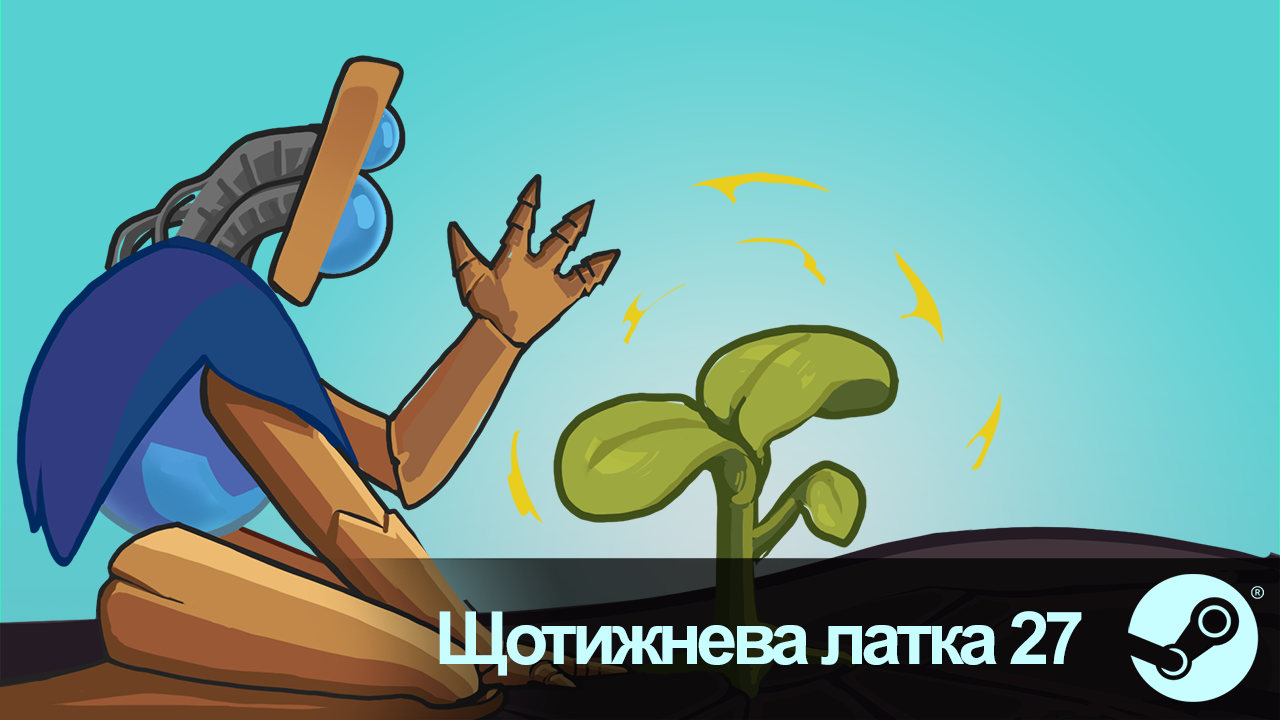
<style>
.page{position:relative;width:1280px;height:720px}
.page>*{position:absolute;margin:0}
.t1{font:73.3px "Arial-BoldMT";letter-spacing:-0.075em;color:#c8feff}
</style>
<div class="page">
<p class="t1" style="left:439px;top:611px;width:643px;height:65px">Щотижнева латка 27</p>
</div>
